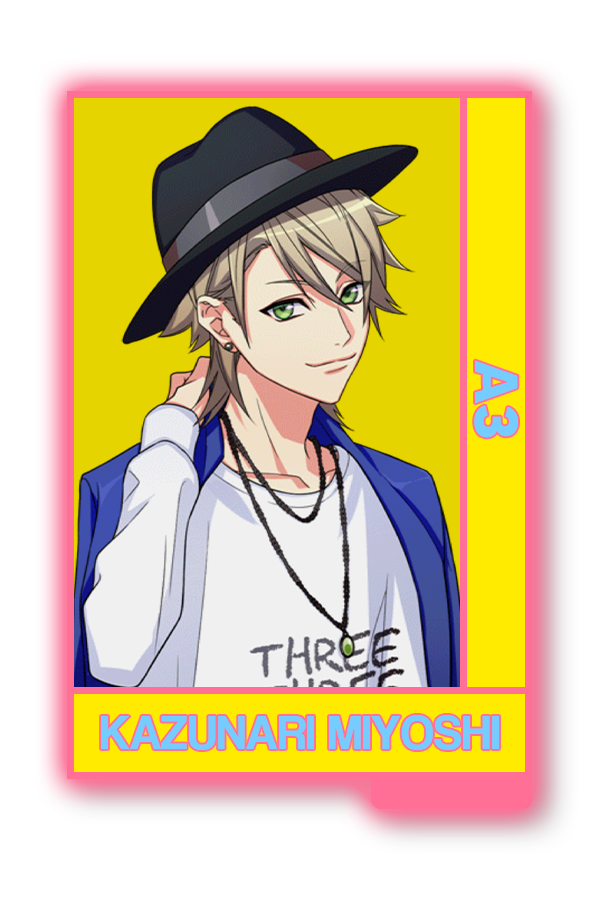
<style>
.page{position:relative;width:600px;height:900px;background:#ffffff}
.page>*{position:absolute;margin:0}
.t1{font:60.5px "MADETOMMY-Bold";color:#74ccff}
.t2{font:49.5px "CoolveticaRg-Regular";color:#74ccff}
</style>
<div class="page">
<p class="t1" style="left:474px;top:360px;width:44px;height:78px;rotate:90deg">A3</p>
<p class="t2" style="left:101px;top:715px;width:398px;height:35px">KAZUNARI MIYOSHI</p>
</div>
